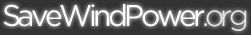
<style>
.page{position:relative;width:251px;height:35px;background:#333333}
.page>*{position:absolute;margin:0}
.t1{font:30px "Gotham-Book";letter-spacing:-0.12em;color:#fdfcfc}
.t2{font:30px "Gotham-Light";letter-spacing:-0.12em;color:#f0efef}
.t3{font:30px "Gotham-Light";letter-spacing:-0.12em;color:#e6e5e5}
</style>
<div class="page">
<p class="t1" style="left:3px;top:4px;width:244px;height:27px">SaveWindPower<span class="t2">.</span><span class="t3">org</span></p>
</div>
